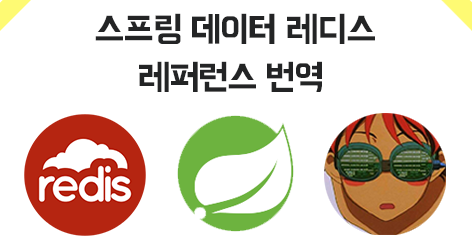
<style>
.page{position:relative;width:472px;height:246px;background:#ffffff}
.page>*{position:absolute;margin:0}
.t1{font:36px/48px "BMHANNA";color:#232425}
</style>
<div class="page">
<p class="t1" style="left:95px;top:13px;width:280px;height:79px;text-align:center">스프링 데이터 레디스 <br>레퍼런스 번역</p>
</div>
